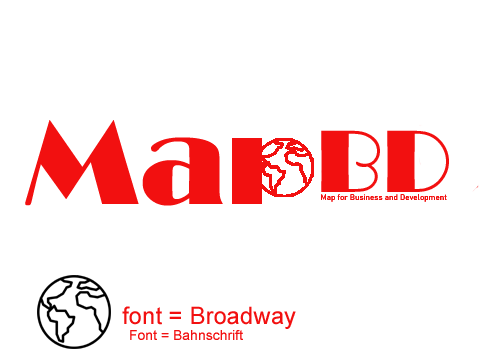
<style>
.page{position:relative;width:504px;height:360px;background:#ffffff}
.page>*{position:absolute;margin:0}
.t1{font:122px "Broadway";color:#f21010}
.t2{font:92px "Broadway";color:#f21010}
.t3{font:8px "Bahnschrift";color:#f21010}
.t4{font:24px "ArialMT";color:#f21010}
.t5{font:14px "ArialMT";color:#f21010}
</style>
<div class="page">
<p class="t1" style="left:25px;top:120px;width:198px;height:86px">Ma</p>
<p class="t2" style="left:321px;top:130px;width:128px;height:62px">BD</p>
<p class="t3" style="left:321px;top:194px;width:126px;height:8px">Map for Business and Development</p>
<p class="t4" style="left:122px;top:306px;width:174px;height:23px">font = Broadway</p>
<p class="t5" style="left:130px;top:330px;width:113px;height:10px">Font = Bahnschrift</p>
</div>
